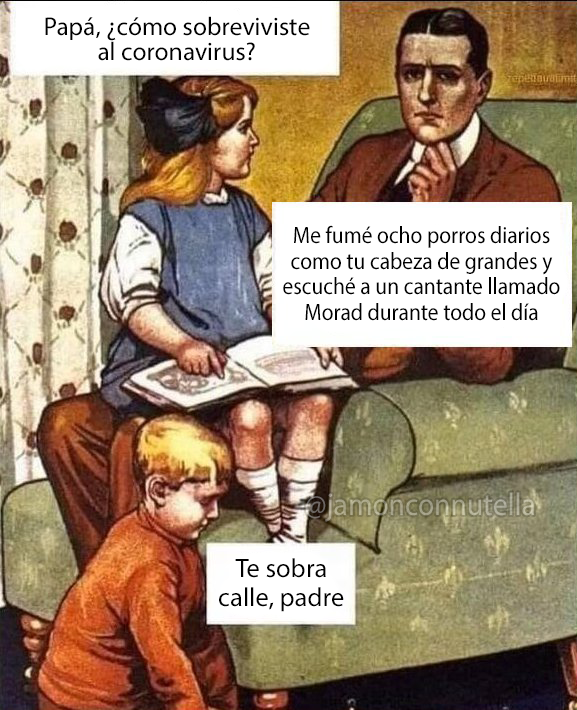
<style>
.page{position:relative;width:577px;height:710px}
.page>*{position:absolute;margin:0}
.t1{font:25.6px "MyriadPro-Regular";color:#000000}
.t2{font:23.8px "MyriadPro-Regular";color:#000000;scale:0.91 1}
.t3{font:31.7px "MyriadPro-Regular";color:#aca990;scale:0.93 1}
.t4{font:26.6px "MyriadPro-Regular";color:#000000}
</style>
<div class="page">
<p class="t1" style="left:45px;top:16px;width:265px;height:45px;text-align:center">Papá, ¿cómo sobreviviste<br>al coronavirus?</p>
<p class="t2" style="left:283px;top:225px;width:277px;height:96px;text-align:center">Me fumé ocho porros diarios<br>como tu cabeza de grandes y<br>escuché a un cantante llamado<br>Morad durante todo el día</p>
<p class="t3" style="left:305px;top:492px;width:229px;height:30px">@jamonconnutella</p>
<p class="t4" style="left:219px;top:558px;width:125px;height:54px;text-align:center">Te sobra<br>calle, padre</p>
</div>
